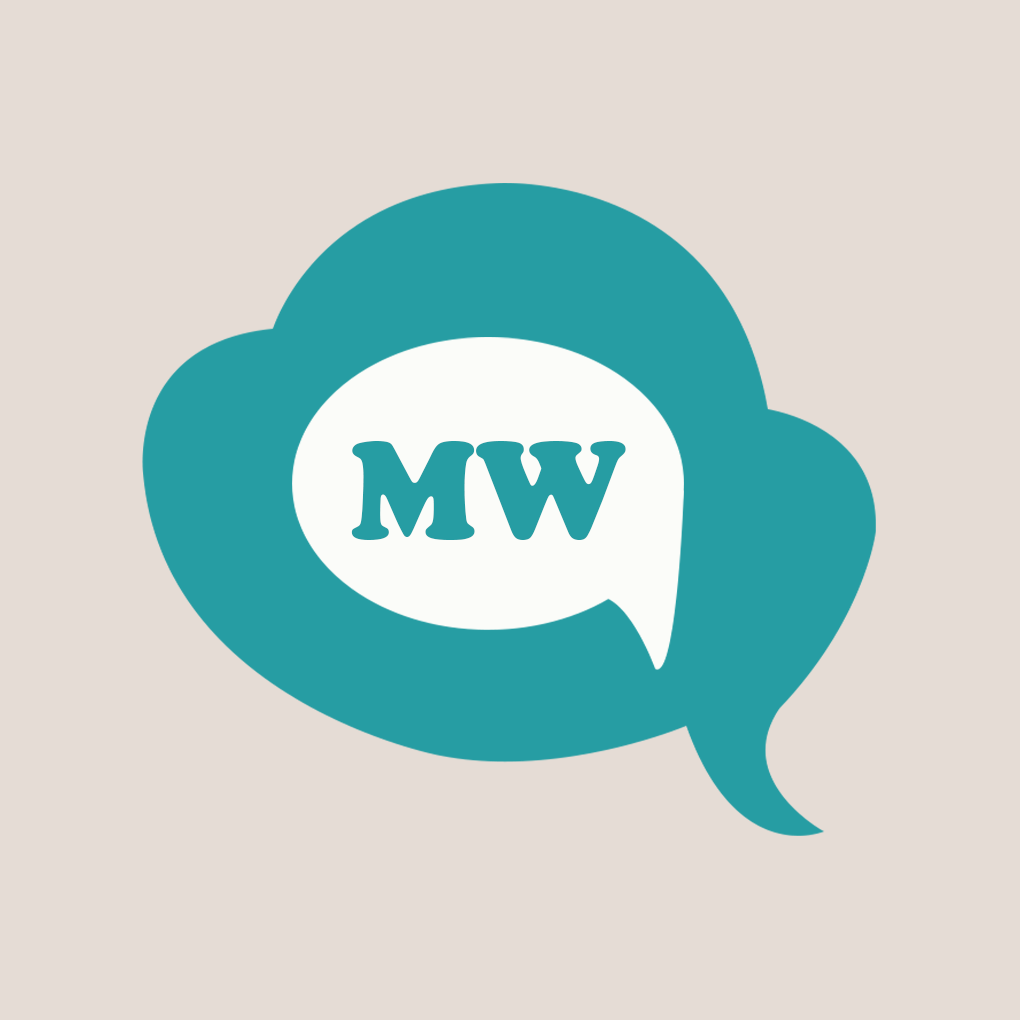
<style>
.page{position:relative;width:1020px;height:1020px;background:#e5dcd5}
.page>*{position:absolute;margin:0}
.t1{font:143.4px "CooperBlack";color:#269da3}
</style>
<div class="page">
<p class="t1" style="left:351px;top:441px;width:275px;height:99px">MW</p>
</div>
